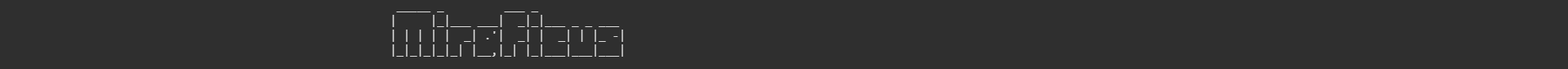
<style>
.page{position:relative;width:1568px;height:69px;background:#2f2f2f}
.page>*{position:absolute;margin:0}
.t1{font:12.2px "Consolas";color:#dddddd}
</style>
<div class="page">
<p class="t1" style="left:392px;top:11px;width:231px;height:45px">_____ _         ___ _             <br>|     |_|___ ___|  _|_|___ _ _ ___ <br>| | | | |  _| .'|  _| |  _| | |_ -|<br>|_|_|_|_|_| |__,|_| |_|___|___|___|</p>
</div>
